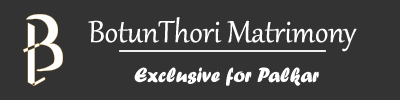
<style>
.page{position:relative;width:400px;height:100px;background:#333333}
.page>*{position:absolute;margin:0}
.t1{font:37.3px "Gabriola";color:#fefefe}
.t2{font:21.3px "ForteMT";color:#ffffff}
</style>
<div class="page">
<p class="t1" style="left:88px;top:17px;width:269px;height:35px">BotunThori Matrimony</p>
<p class="t2" style="left:134px;top:67px;width:185px;height:19px">Exclusive for Palkar</p>
</div>
